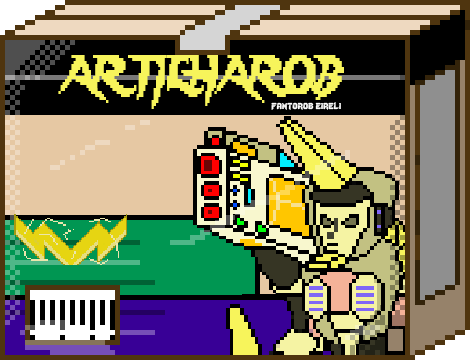
<style>
.page{position:relative;width:470px;height:360px}
.page>*{position:absolute;margin:0}
.t1{font:48px "Lady-Radical";color:#f7f45b;scale:0.72 1}
.t2{font:12px "Lady-Radical";color:#fbfbfb}
</style>
<div class="page">
<p class="t1" style="left:58px;top:55px;width:286px;height:54px">ARTILHAROB</p>
<p class="t2" style="left:271px;top:102px;width:70px;height:8px">fantorob eireli</p>
</div>
